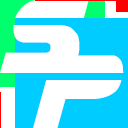
<style>
.page{position:relative;width:128px;height:128px;background:#ffffff}
.page>*{position:absolute;margin:0}
.t1{font:105px "BladeRunnerMovieFont";color:#ffffff}
</style>
<div class="page">
<p class="t1" style="left:0px;top:0px;width:89px;height:73px">S</p>
<p class="t1" style="left:33px;top:55px;width:91px;height:73px">P</p>
</div>
